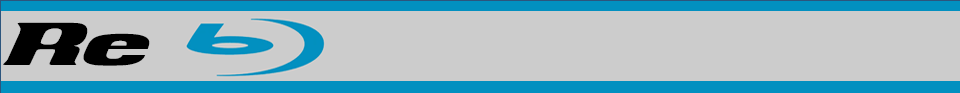
<style>
.page{position:relative;width:960px;height:93px;background:#cccccc}
.page>*{position:absolute;margin:0}
.t1{font:72px "Desperado";color:#000000}
</style>
<div class="page">
<p class="t1" style="left:3px;top:22px;width:147px;height:44px">Re</p>
</div>
